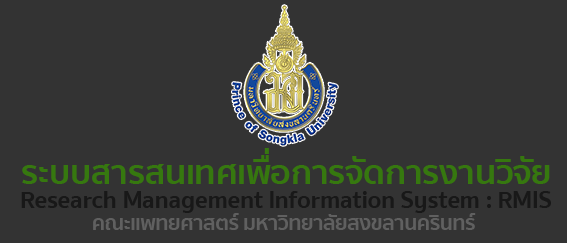
<style>
.page{position:relative;width:567px;height:243px;background:#333333}
.page>*{position:absolute;margin:0}
.t1{font:34.2px "SukhumvitSet-Bold";letter-spacing:-0.01em;color:#36780f}
.t2{font:24.9px "SukhumvitSet-Bold";letter-spacing:-0.01em;color:#181818}
.t3{font:20.6px "SukhumvitSet-Bold";letter-spacing:-0.01em;color:#606060}
</style>
<div class="page">
<p class="t1" style="left:22px;top:148px;width:528px;height:36px">ระบบสารสนเทศเพื่อการจัดการงานวิจัย</p>
<p class="t2" style="left:21px;top:191px;width:530px;height:22px">Research Management Information System : RMIS</p>
<p class="t3" style="left:93px;top:213px;width:383px;height:17px">คณะแพทยศาสตร์ มหาวิทยาลัยสงขลานครินทร์</p>
</div>
